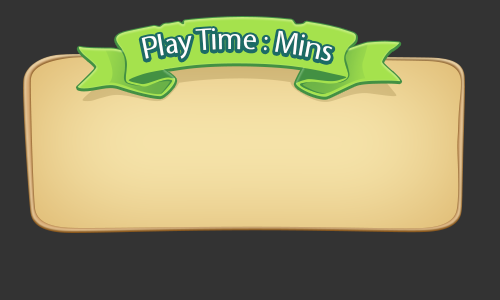
<style>
.page{position:relative;width:500px;height:300px;background:#333333}
.page>*{position:absolute;margin:0}
.t1{font:30.6px "MyriadPro-Regular";letter-spacing:-0.02em;color:#ffffff;scale:0.96 1}
</style>
<div class="page">
<p class="t1" style="left:141px;top:28px;width:192px;height:33px;rotate:1deg">Play Time : Mins</p>
</div>
